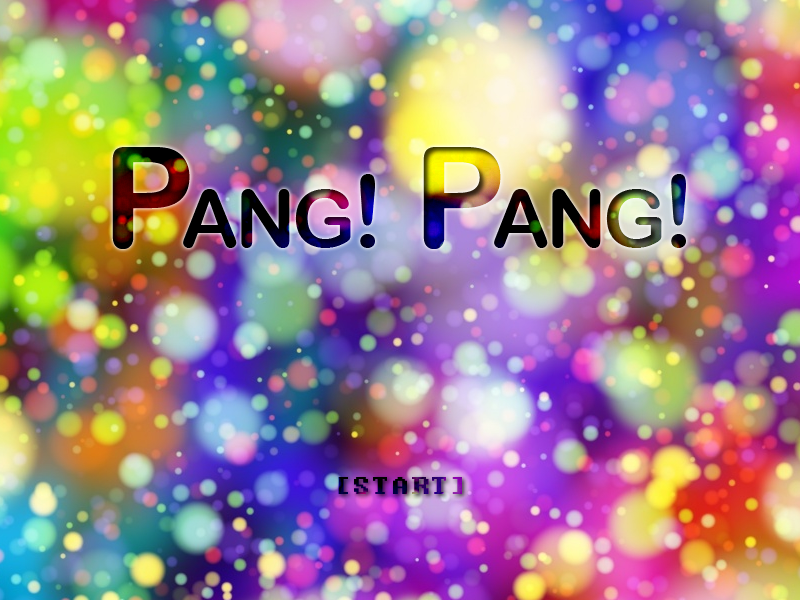
<style>
.page{position:relative;width:800px;height:600px}
.page>*{position:absolute;margin:0}
.t1{font:80px "ArialRoundedMTBold";letter-spacing:-0.05em}
.t2{font:140px "ArialRoundedMTBold";letter-spacing:-0.1em}
.t3{font:100px "ArialRoundedMTBold"}
.t4{font:30px "Terminal";letter-spacing:0.025em}
.t5{font:30px "Terminal";letter-spacing:-0.1em}
</style>
<div class="page">
<p class="t1" style="left:112px;top:147px;width:263px;height:102px"><span class="t2">P</span>ANG<span class="t3">!</span></p>
<p class="t1" style="left:112px;top:147px;width:263px;height:102px"><span class="t2">P</span>ANG<span class="t3">!</span></p>
<p class="t1" style="left:423px;top:147px;width:263px;height:102px"><span class="t2">P</span>ANG<span class="t3">!</span></p>
<p class="t1" style="left:423px;top:147px;width:263px;height:102px"><span class="t2">P</span>ANG<span class="t3">!</span></p>
<p class="t4" style="left:338px;top:477px;width:124px;height:17px">[STAR<span class="t5">T]</span></p>
<p class="t4" style="left:338px;top:477px;width:124px;height:17px">[STAR<span class="t5">T]</span></p>
</div>
